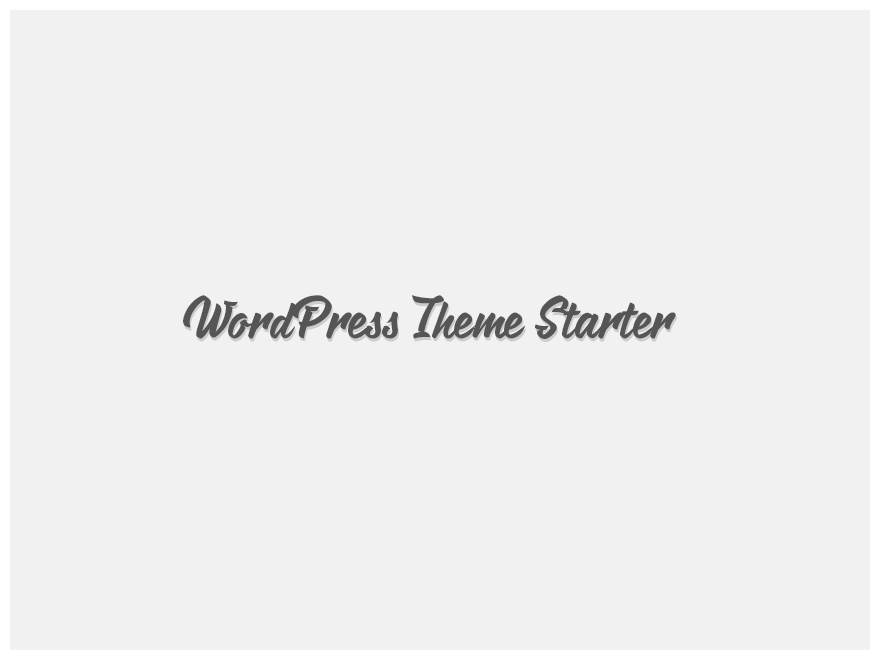
<style>
.page{position:relative;width:880px;height:660px;background:#f1f1f1}
.page>*{position:absolute;margin:0}
.t1{font:52.3px "Nihlah";color:#555555}
.t2{font:52.3px "Nihlah"}
</style>
<div class="page">
<p class="t1" style="left:183px;top:295px;width:493px;height:44px">WordPress Theme Starter</p>
<p class="t2" style="left:184px;top:298px;width:493px;height:44px">WordPress Theme Starter</p>
</div>
